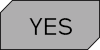
<style>
.page{position:relative;width:100px;height:50px;background:#afaeaf}
.page>*{position:absolute;margin:0}
.t1{font:24px "Maax";color:#000000}
</style>
<div class="page">
<p class="t1" style="left:29px;top:18px;width:43px;height:17px">YES</p>
</div>
